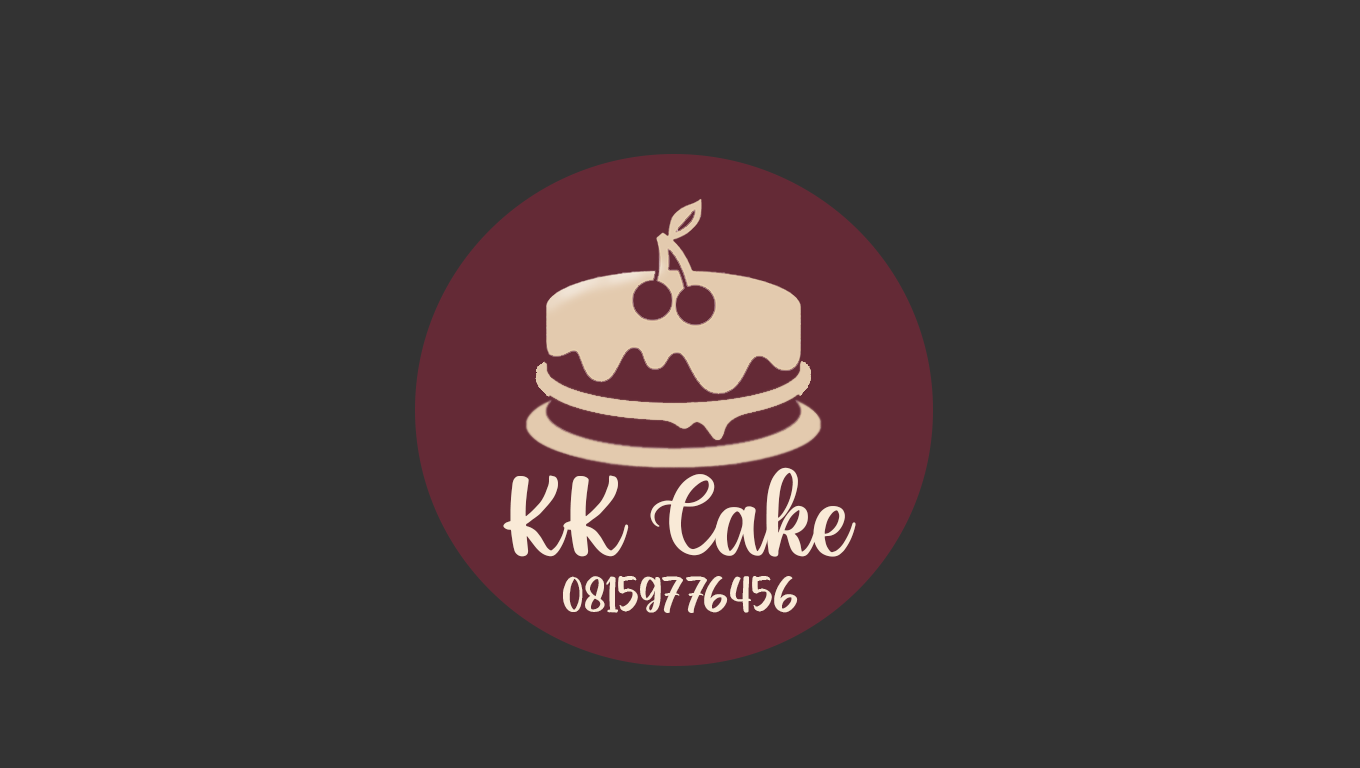
<style>
.page{position:relative;width:1360px;height:768px;background:#333333}
.page>*{position:absolute;margin:0}
.t1{font:125px "HelloValentica-Regular";color:#f9ead7}
.t2{font:55px "HelloValentica-Regular";color:#f9ead7}
</style>
<div class="page">
<p class="t1" style="left:503px;top:467px;width:353px;height:90px">KK Cake</p>
<p class="t2" style="left:563px;top:576px;width:235px;height:37px">08159776456</p>
</div>
